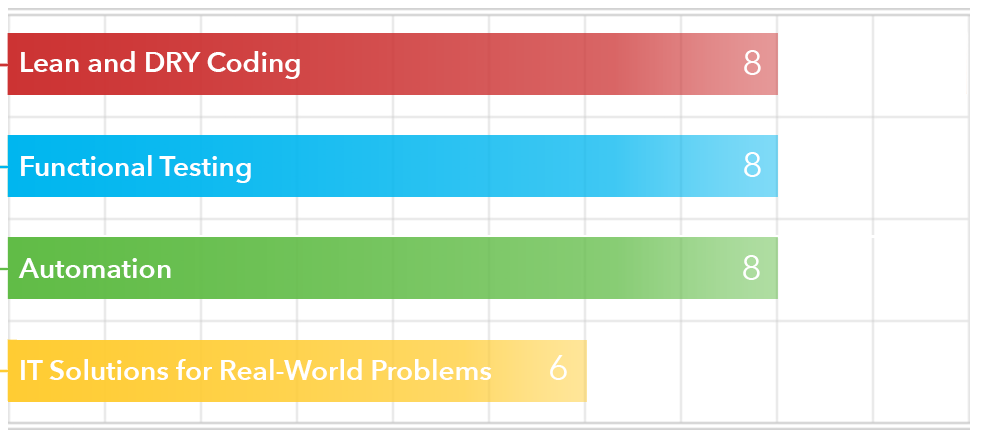
<style>
.page{position:relative;width:982px;height:442px;background:#ffffff}
.page>*{position:absolute;margin:0}
.t1{font:28px "AvenirNext-DemiBold";color:#ffffff}
.t2{font:36px "AvenirNext-Regular";color:#ffffff}
</style>
<div class="page">
<p class="t1" style="left:21px;top:51px;width:279px;height:28px">Lean and DRY Coding</p>
<p class="t2" style="left:744px;top:50px;width:17px;height:25px">8</p>
<p class="t1" style="left:21px;top:155px;width:230px;height:28px">Functional Testing</p>
<p class="t2" style="left:744px;top:152px;width:17px;height:25px">8</p>
<p class="t2" style="left:743px;top:255px;width:17px;height:25px">8</p>
<p class="t1" style="left:18px;top:258px;width:153px;height:20px">Automation</p>
<p class="t1" style="left:21px;top:359px;width:471px;height:21px">IT Solutions for Real-World Problems</p>
<p class="t2" style="left:550px;top:355px;width:17px;height:25px">6</p>
</div>
